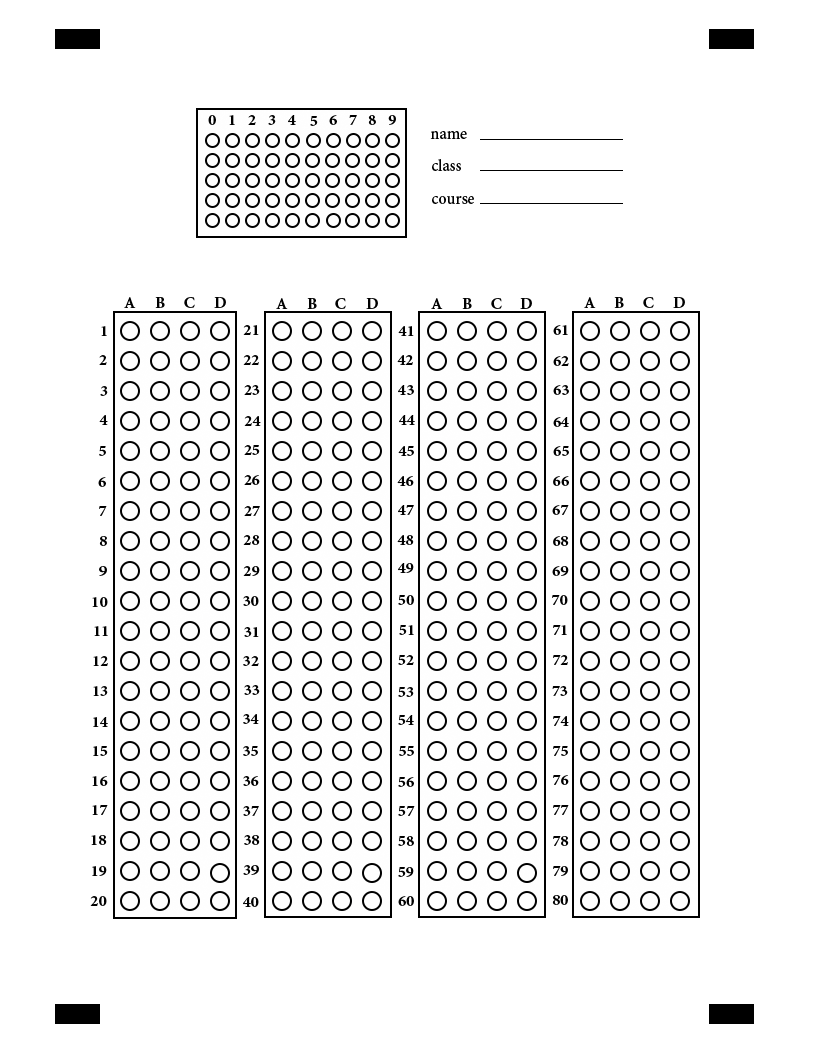
<style>
.page{position:relative;width:816px;height:1056px;background:#ffffff}
.page>*{position:absolute;margin:0}
.t1{font:22.2px "AdobeArabic-Bold";color:#000000}
.t2{font:22.2px "AdobeArabic-Regular";color:#000000}
</style>
<div class="page">
<p class="t1" style="left:208px;top:115px;width:8px;height:10px">0</p>
<p class="t1" style="left:229px;top:115px;width:6px;height:10px">1</p>
<p class="t1" style="left:248px;top:115px;width:8px;height:10px">2</p>
<p class="t1" style="left:268px;top:115px;width:8px;height:10px">3</p>
<p class="t1" style="left:288px;top:115px;width:8px;height:10px">4</p>
<p class="t1" style="left:310px;top:116px;width:8px;height:10px">5</p>
<p class="t1" style="left:329px;top:115px;width:8px;height:10px">6</p>
<p class="t1" style="left:349px;top:115px;width:8px;height:10px">7</p>
<p class="t1" style="left:368px;top:115px;width:8px;height:10px">8</p>
<p class="t1" style="left:388px;top:115px;width:8px;height:10px">9</p>
<p class="t2" style="left:430px;top:131px;width:37px;height:8px">name</p>
<p class="t2" style="left:432px;top:159px;width:29px;height:12px">class</p>
<p class="t2" style="left:432px;top:196px;width:42px;height:8px">course</p>
<p class="t1" style="left:124px;top:297px;width:12px;height:11px">A</p>
<p class="t1" style="left:155px;top:297px;width:10px;height:11px">B</p>
<p class="t1" style="left:184px;top:297px;width:11px;height:11px">C</p>
<p class="t1" style="left:214px;top:297px;width:12px;height:11px">D</p>
<p class="t1" style="left:276px;top:298px;width:12px;height:11px">A</p>
<p class="t1" style="left:307px;top:298px;width:10px;height:11px">B</p>
<p class="t1" style="left:335px;top:298px;width:11px;height:11px">C</p>
<p class="t1" style="left:366px;top:298px;width:12px;height:11px">D</p>
<p class="t1" style="left:431px;top:298px;width:12px;height:11px">A</p>
<p class="t1" style="left:462px;top:298px;width:10px;height:11px">B</p>
<p class="t1" style="left:491px;top:298px;width:11px;height:11px">C</p>
<p class="t1" style="left:520px;top:298px;width:12px;height:11px">D</p>
<p class="t1" style="left:584px;top:297px;width:12px;height:11px">A</p>
<p class="t1" style="left:614px;top:297px;width:10px;height:11px">B</p>
<p class="t1" style="left:643px;top:297px;width:11px;height:11px">C</p>
<p class="t1" style="left:673px;top:297px;width:12px;height:11px">D</p>
<p class="t1" style="left:101px;top:326px;width:6px;height:10px">1</p>
<p class="t1" style="left:243px;top:325px;width:16px;height:10px">21</p>
<p class="t1" style="left:398px;top:326px;width:16px;height:10px">41</p>
<p class="t1" style="left:553px;top:325px;width:15px;height:10px">61</p>
<p class="t1" style="left:99px;top:355px;width:8px;height:10px">2</p>
<p class="t1" style="left:243px;top:355px;width:16px;height:10px">22</p>
<p class="t1" style="left:397px;top:355px;width:16px;height:10px">42</p>
<p class="t1" style="left:553px;top:356px;width:16px;height:10px">62</p>
<p class="t1" style="left:100px;top:386px;width:8px;height:10px">3</p>
<p class="t1" style="left:244px;top:385px;width:16px;height:10px">23</p>
<p class="t1" style="left:398px;top:385px;width:16px;height:10px">43</p>
<p class="t1" style="left:553px;top:385px;width:16px;height:10px">63</p>
<p class="t1" style="left:99px;top:415px;width:9px;height:10px">4</p>
<p class="t1" style="left:244px;top:416px;width:17px;height:10px">24</p>
<p class="t1" style="left:399px;top:415px;width:16px;height:10px">44</p>
<p class="t1" style="left:553px;top:417px;width:16px;height:10px">64</p>
<p class="t1" style="left:99px;top:446px;width:7px;height:10px">5</p>
<p class="t1" style="left:244px;top:445px;width:16px;height:10px">25</p>
<p class="t1" style="left:398px;top:446px;width:16px;height:10px">45</p>
<p class="t1" style="left:553px;top:446px;width:16px;height:10px">65</p>
<p class="t1" style="left:98px;top:477px;width:8px;height:10px">6</p>
<p class="t1" style="left:244px;top:475px;width:16px;height:10px">26</p>
<p class="t1" style="left:397px;top:476px;width:17px;height:10px">46</p>
<p class="t1" style="left:553px;top:476px;width:16px;height:10px">66</p>
<p class="t1" style="left:99px;top:506px;width:8px;height:10px">7</p>
<p class="t1" style="left:244px;top:506px;width:16px;height:10px">27</p>
<p class="t1" style="left:398px;top:505px;width:16px;height:10px">47</p>
<p class="t1" style="left:552px;top:505px;width:17px;height:10px">67</p>
<p class="t1" style="left:99px;top:536px;width:8px;height:10px">8</p>
<p class="t1" style="left:243px;top:535px;width:17px;height:10px">28</p>
<p class="t1" style="left:397px;top:535px;width:17px;height:10px">48</p>
<p class="t1" style="left:553px;top:536px;width:16px;height:10px">68</p>
<p class="t1" style="left:99px;top:566px;width:8px;height:10px">9</p>
<p class="t1" style="left:243px;top:566px;width:17px;height:10px">29</p>
<p class="t1" style="left:398px;top:563px;width:16px;height:10px">49</p>
<p class="t1" style="left:552px;top:566px;width:17px;height:10px">69</p>
<p class="t1" style="left:92px;top:597px;width:16px;height:10px">10</p>
<p class="t1" style="left:243px;top:596px;width:16px;height:10px">30</p>
<p class="t1" style="left:398px;top:595px;width:16px;height:10px">50</p>
<p class="t1" style="left:552px;top:595px;width:16px;height:10px">70</p>
<p class="t1" style="left:94px;top:626px;width:14px;height:10px">11</p>
<p class="t1" style="left:244px;top:627px;width:15px;height:10px">31</p>
<p class="t1" style="left:399px;top:625px;width:15px;height:10px">51</p>
<p class="t1" style="left:553px;top:625px;width:14px;height:10px">71</p>
<p class="t1" style="left:93px;top:656px;width:15px;height:10px">12</p>
<p class="t1" style="left:243px;top:656px;width:16px;height:10px">32</p>
<p class="t1" style="left:398px;top:655px;width:16px;height:10px">52</p>
<p class="t1" style="left:553px;top:655px;width:15px;height:10px">72</p>
<p class="t1" style="left:93px;top:686px;width:15px;height:10px">13</p>
<p class="t1" style="left:244px;top:685px;width:16px;height:10px">33</p>
<p class="t1" style="left:398px;top:687px;width:16px;height:10px">53</p>
<p class="t1" style="left:552px;top:686px;width:16px;height:10px">73</p>
<p class="t1" style="left:93px;top:717px;width:15px;height:10px">14</p>
<p class="t1" style="left:243px;top:714px;width:16px;height:10px">34</p>
<p class="t1" style="left:398px;top:715px;width:16px;height:10px">54</p>
<p class="t1" style="left:553px;top:716px;width:16px;height:10px">74</p>
<p class="t1" style="left:93px;top:746px;width:15px;height:10px">15</p>
<p class="t1" style="left:243px;top:746px;width:15px;height:10px">35</p>
<p class="t1" style="left:399px;top:746px;width:15px;height:10px">55</p>
<p class="t1" style="left:553px;top:746px;width:15px;height:10px">75</p>
<p class="t1" style="left:92px;top:776px;width:16px;height:10px">16</p>
<p class="t1" style="left:243px;top:776px;width:16px;height:10px">36</p>
<p class="t1" style="left:398px;top:777px;width:16px;height:10px">56</p>
<p class="t1" style="left:553px;top:775px;width:16px;height:10px">76</p>
<p class="t1" style="left:92px;top:805px;width:16px;height:10px">17</p>
<p class="t1" style="left:243px;top:806px;width:16px;height:10px">37</p>
<p class="t1" style="left:398px;top:806px;width:17px;height:10px">57</p>
<p class="t1" style="left:553px;top:805px;width:16px;height:10px">77</p>
<p class="t1" style="left:91px;top:835px;width:16px;height:10px">18</p>
<p class="t1" style="left:244px;top:835px;width:16px;height:10px">38</p>
<p class="t1" style="left:398px;top:836px;width:16px;height:10px">58</p>
<p class="t1" style="left:553px;top:836px;width:16px;height:10px">78</p>
<p class="t1" style="left:92px;top:866px;width:15px;height:10px">19</p>
<p class="t1" style="left:243px;top:865px;width:16px;height:10px">39</p>
<p class="t1" style="left:398px;top:867px;width:16px;height:10px">59</p>
<p class="t1" style="left:553px;top:866px;width:15px;height:10px">79</p>
<p class="t1" style="left:90px;top:896px;width:17px;height:10px">20</p>
<p class="t1" style="left:243px;top:897px;width:16px;height:10px">40</p>
<p class="t1" style="left:398px;top:896px;width:16px;height:10px">60</p>
<p class="t1" style="left:552px;top:895px;width:16px;height:10px">80</p>
</div>
